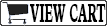
<style>
.page{position:relative;width:107px;height:26px;background:#ffffff}
.page>*{position:absolute;margin:0}
.t1{font:25.6px "IowanOldStyle-Black";color:#000000;scale:0.44 1}
</style>
<div class="page">
<p class="t1" style="left:29px;top:4px;width:77px;height:18px">VIEW CART</p>
</div>
